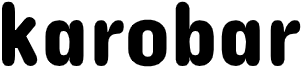
<style>
.page{position:relative;width:301px;height:67px;background:#ffffff}
.page>*{position:absolute;margin:0}
.t1{font:94px "ConcertOne-Regular";color:#000000}
</style>
<div class="page">
<p class="t1" style="left:1px;top:1px;width:300px;height:66px">karobar</p>
</div>
